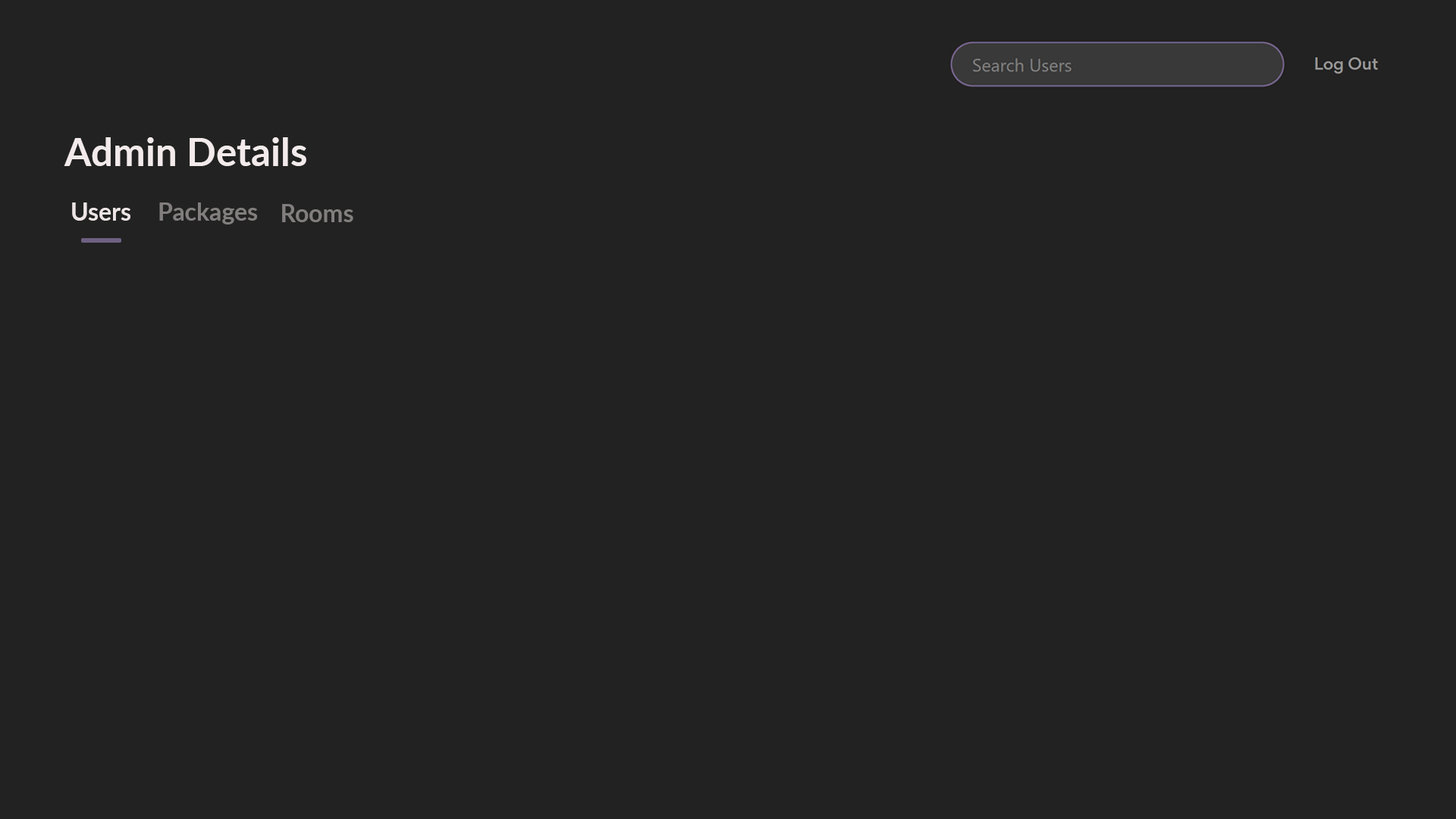
<style>
.page{position:relative;width:1456px;height:819px;background:#222222}
.page>*{position:absolute;margin:0}
.t1{font:38.8px "Lato-Bold";color:#f3ebeb}
.t2{font:24.3px "Lato-Bold";color:#f3ebeb}
.t3{font:24.3px "Lato-Bold";color:#827e7e}
</style>
<div class="page">
<p class="t1" style="left:64px;top:137px;width:242px;height:29px">Admin Details</p>
<p class="t2" style="left:72px;top:202px;width:58px;height:19px;opacity:0.96">Users</p>
<p class="t3" style="left:159px;top:202px;width:98px;height:22px">Packages</p>
<p class="t3" style="left:282px;top:204px;width:71px;height:18px">Rooms</p>
</div>
